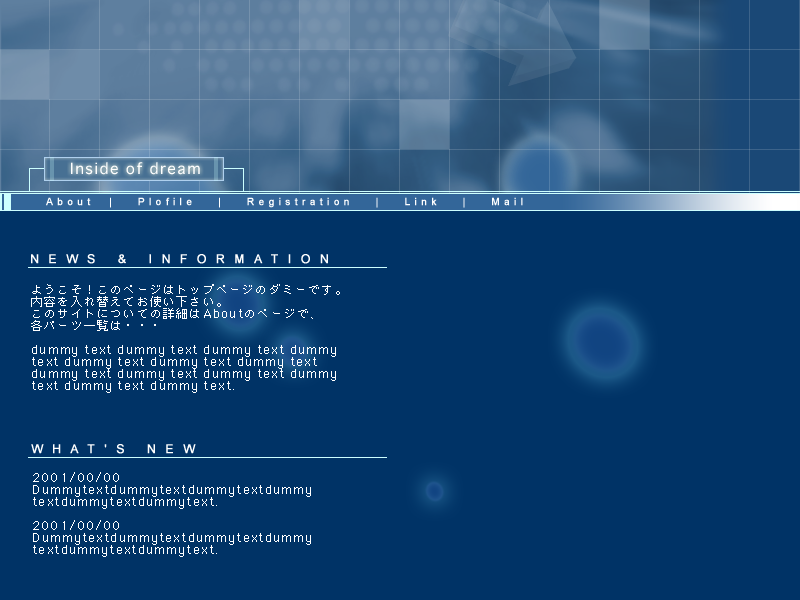
<style>
.page{position:relative;width:800px;height:600px;background:#003366}
.page>*{position:absolute;margin:0}
.t1{font:15px "Osaka";letter-spacing:0.1em;color:#ffffff}
.t2{font:10px "ArialMT";letter-spacing:0.42em;color:#ffffff;font-weight:bold}
.t3{font:12px "ArialMT";letter-spacing:0.78em;color:#ffffff;font-weight:bold}
.t4{font:12px/12px "Osaka";letter-spacing:0.1em;color:#ffffff}
.t5{font:12px/27px "Osaka";letter-spacing:0.1em;color:#ffffff}
</style>
<div class="page">
<p class="t1" style="left:71px;top:162px;width:129px;height:13px">Inside of dream</p>
<p class="t2" style="left:46px;top:197px;width:477px;height:11px">About  |   Plofile   |   Registration   |   Link   |   Mail</p>
<p class="t3" style="left:31px;top:254px;width:297px;height:10px">NEWS &amp; INFORMATION</p>
<p class="t4" style="left:31px;top:284px;width:309px;height:109px">ようこそ！このページはトップページのダミーです。<br>内容を入れ替えてお使い下さい。<br>このサイトについての詳細はAboutのページで、<br>各パーツ一覧は・・・<br><br>dummy text dummy text dummy text dummy<br>text dummy text dummy text dummy text<br>dummy text dummy text dummy text dummy<br>text dummy text dummy text.</p>
<p class="t3" style="left:31px;top:444px;width:165px;height:10px">WHAT'S NEW</p>
<p class="t4" style="left:33px;top:472px;width:278px;height:85px"><span class="t5">2001/00/00</span><br>Dummytextdummytextdummytextdummy<br>textdummytextdummytext.<br><br>2001/00/00<br>Dummytextdummytextdummytextdummy<br>textdummytextdummytext.</p>
</div>
